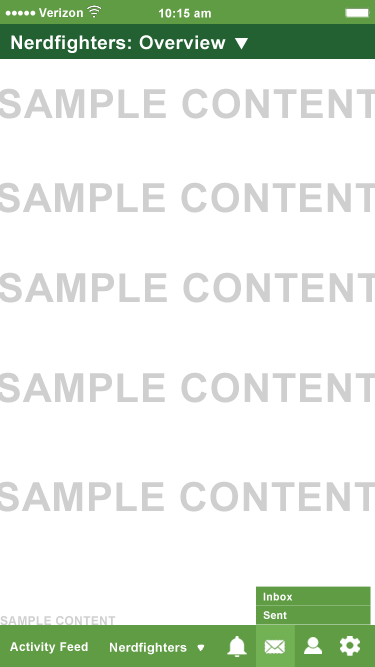
<style>
.page{position:relative;width:375px;height:667px;background:#ffffff}
.page>*{position:absolute;margin:0}
.t1{font:12px "Arial-BoldMT";letter-spacing:0.025em;color:#ffffff}
.t2{font:18.7px "Arial-BoldMT";letter-spacing:0.025em;color:#ffffff}
.t3{font:10.7px "Arial-BoldMT";letter-spacing:0.025em;color:#ffffff}
.t4{font:12.5px "Arial-BoldMT";letter-spacing:0.025em;color:#ffffff}
</style>
<div class="page">
<p class="t1" style="left:39px;top:8px;width:44px;height:9px">Verizon</p>
<p class="t1" style="left:159px;top:8px;width:52px;height:10px">10:15 am</p>
<p class="t2" style="left:11px;top:35px;width:215px;height:18px">Nerdfighters: Overview</p>
<p class="t3" style="left:263px;top:592px;width:30px;height:9px">Inbox</p>
<p class="t3" style="left:263px;top:611px;width:24px;height:8px">Sent</p>
<p class="t1" style="left:10px;top:642px;width:78px;height:12px">Activity Feed</p>
<p class="t4" style="left:110px;top:642px;width:77px;height:13px">Nerdfighters</p>
</div>
